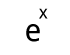
<style>
.page{position:relative;width:70px;height:55px;background:#ffffff}
.page>*{position:absolute;margin:0}
.t1{font:18px "DroidSans";color:#000000}
.t2{font:31.8px "DroidSans";color:#000000}
</style>
<div class="page">
<p class="t1" style="left:39px;top:8px;width:9px;height:11px">x</p>
<p class="t2" style="left:26px;top:24px;width:14px;height:18px">e</p>
</div>
